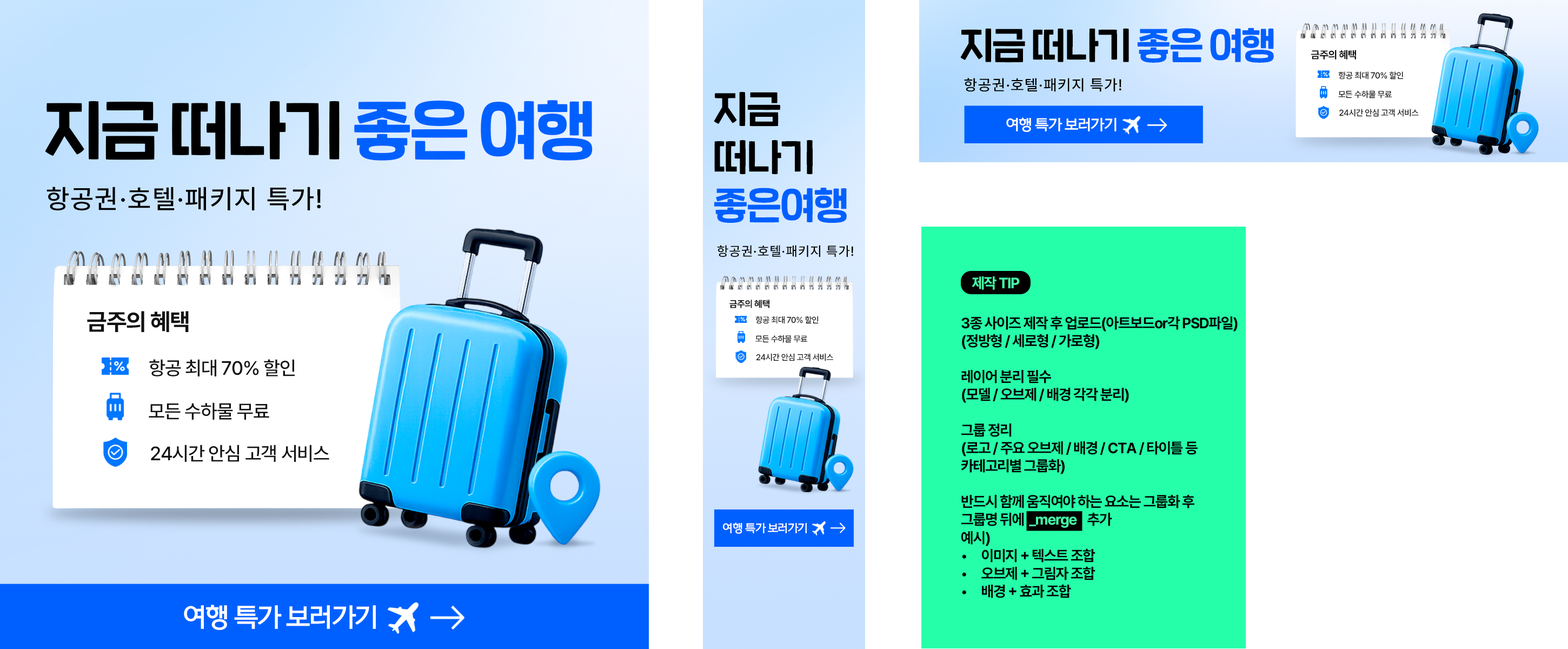
<style>
.page{position:relative;width:1568px;height:649px;background:#ffffff}
.page>*{position:absolute;margin:0}
.t1{font:37px "SDNemony-aBasic";letter-spacing:-0.03em;color:#000000}
.t2{font:37px "SDNemony-aBasic";letter-spacing:-0.03em;color:#0060ff}
.t3{font:10.4px "Pretendard-Bold";letter-spacing:-0.03em;color:#111111}
.t4{font:15.4px "Pretendard-Medium";letter-spacing:0.05em;color:#000000}
.t5{font:8.5px "Pretendard-Medium";letter-spacing:-0.03em;color:#111111}
.t6{font:64.3px "SDNemony-aBasic";letter-spacing:-0.03em;color:#000000}
.t7{font:64.3px "SDNemony-aBasic";letter-spacing:-0.03em;color:#0060ff}
.t8{font:37.5px/48.2px "SDNemony-aBasic";letter-spacing:-0.03em;color:#000000}
.t9{font:37.5px/48.2px "SDNemony-aBasic";letter-spacing:-0.03em;color:#0060ff}
.t10{font:14.8px "ONEMobileOTFBold";letter-spacing:-0.04em;color:#ffffff}
.t11{font:26.8px "Pretendard-Medium";letter-spacing:0.05em;color:#000000}
.t12{font:13.2px "Pretendard-Medium";letter-spacing:0.05em;color:#000000}
.t13{font:14.9px "Pretendard-Bold";letter-spacing:-0.05em;color:#47fda9}
.t14{font:9.3px "Pretendard-Bold";letter-spacing:-0.03em;color:#111111}
.t15{font:23.6px "Pretendard-Bold";letter-spacing:-0.03em;color:#111111}
.t16{font:8.4px "Pretendard-Medium";letter-spacing:-0.03em;color:#111111}
.t17{font:14.9px "Pretendard-Bold";letter-spacing:-0.05em;color:#000000}
.t18{font:14.9px "Pretendard-Bold";letter-spacing:-0.05em;color:#46fca9}
.t19{font:19.3px "Pretendard-Medium";letter-spacing:-0.03em;color:#111111}
.t20{font:11.3px "ONEMobileOTFBold";letter-spacing:-0.04em;color:#ffffff}
.t21{font:26px "ONEMobileOTFBold";letter-spacing:-0.04em;color:#ffffff}
</style>
<div class="page">
<p class="t1" style="left:960px;top:28px;width:314px;height:35px">지금 떠나기 <span class="t2">좋은 여행</span></p>
<p class="t3" style="left:1311px;top:50px;width:45px;height:9px">금주의 혜택</p>
<p class="t4" style="left:964px;top:78px;width:157px;height:14px">항공권·호텔·패키지 특가!</p>
<p class="t5" style="left:1338px;top:71px;width:66px;height:8px">항공 최대 70% 할인</p>
<p class="t6" style="left:45px;top:100px;width:548px;height:61px">지금 떠나기 <span class="t7">좋은 여행</span></p>
<p class="t8" style="left:714px;top:92px;width:133px;height:131px">지금<br>떠나기<br><span class="t9">좋은여행</span></p>
<p class="t5" style="left:1338px;top:90px;width:54px;height:8px">모든 수하물 무료</p>
<p class="t5" style="left:1339px;top:109px;width:80px;height:8px">24시간 안심 고객 서비스</p>
<p class="t10" style="left:1006px;top:117px;width:111px;height:15px">여행 특가 보러가기</p>
<p class="t11" style="left:46px;top:187px;width:275px;height:23px">항공권·호텔·패키지 특가!</p>
<p class="t12" style="left:717px;top:245px;width:136px;height:12px">항공권·호텔·패키지 특가!</p>
<p class="t13" style="left:972px;top:276px;width:48px;height:14px">제작 TIP</p>
<p class="t14" style="left:729px;top:300px;width:40px;height:8px">금주의 혜택</p>
<p class="t15" style="left:87px;top:311px;width:102px;height:21px">금주의 혜택</p>
<p class="t16" style="left:755px;top:316px;width:64px;height:8px">항공 최대 70% 할인</p>
<p class="t17" style="left:961px;top:316px;width:277px;height:282px">3종 사이즈 제작 후 업로드(아트보드or각 PSD파일)<br>(정방형 / 세로형 / 가로형)<br><br>레이어 분리 필수<br>(모델 / 오브제 / 배경 각각 분리)<br><br>그룹 정리<br>(로고 / 주요 오브제 / 배경 / CTA / 타이틀 등<br>카테고리별 그룹화)<br><br>반드시 함께 움직여야 하는 요소는 그룹화 후<br>그룹명 뒤에<span class="t18">  _merge </span>   추가<br>예시)<br>이미지 + 텍스트 조합<br>오브제 + 그림자 조합<br>배경 + 효과 조합</p>
<p class="t16" style="left:755px;top:335px;width:52px;height:8px">모든 수하물 무료</p>
<p class="t16" style="left:756px;top:353px;width:77px;height:8px">24시간 안심 고객 서비스</p>
<p class="t19" style="left:149px;top:359px;width:146px;height:17px">항공 최대 70% 할인</p>
<p class="t19" style="left:149px;top:402px;width:120px;height:18px">모든 수하물 무료</p>
<p class="t19" style="left:151px;top:444px;width:178px;height:18px">24시간 안심 고객 서비스</p>
<p class="t20" style="left:723px;top:522px;width:84px;height:12px">여행 특가 보러가기</p>
<p class="t21" style="left:184px;top:604px;width:192px;height:26px">여행 특가 보러가기</p>
</div>
